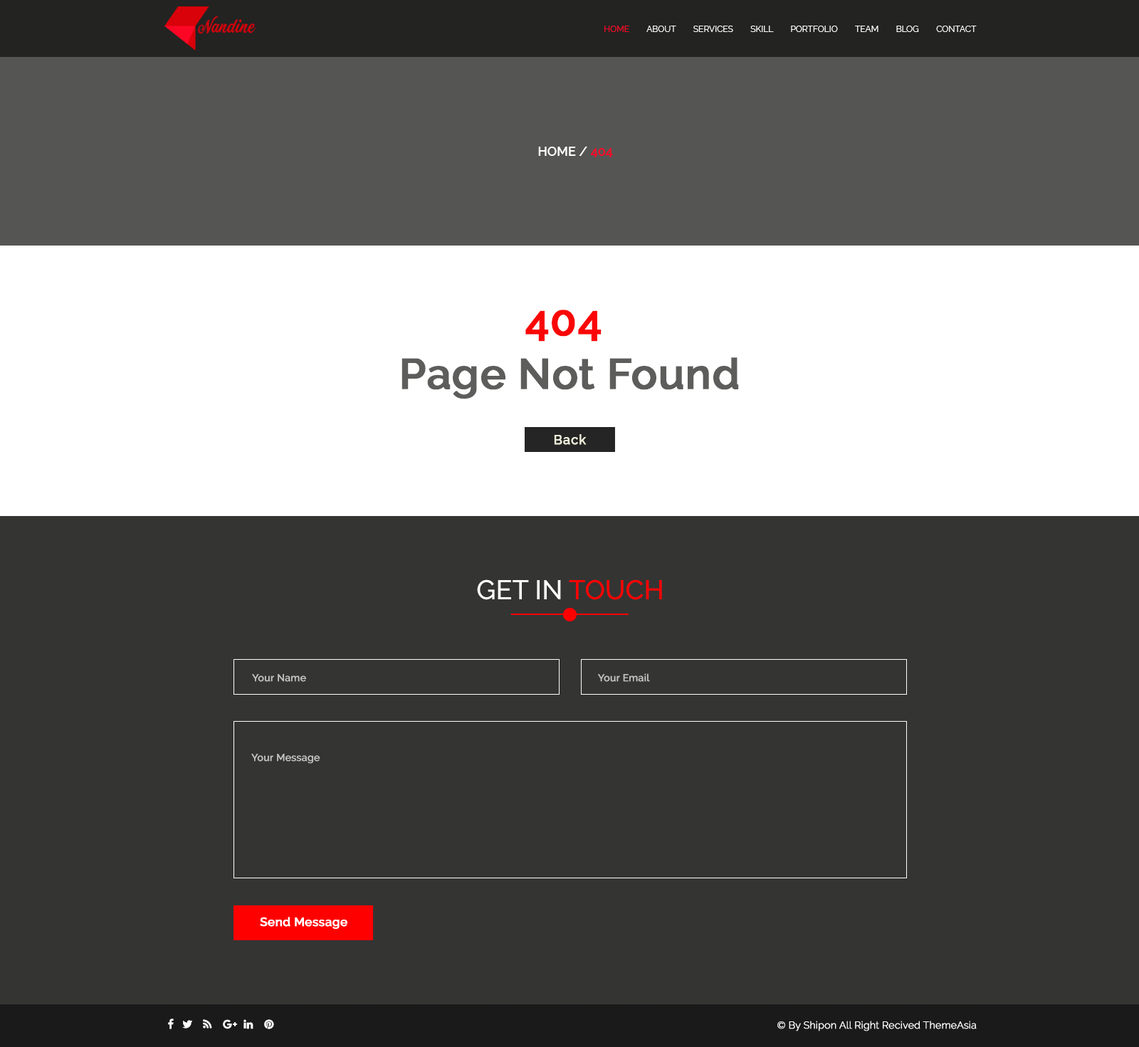
<style>
.page{position:relative;width:1139px;height:1047px;background:#343433}
.page>*{position:absolute;margin:0}
.t1{font:8.5px "Raleway-Regular";color:#ffffff;text-transform:uppercase}
.t2{font:8.5px "Raleway-Regular";color:#fc0625;text-transform:uppercase}
.t3{font:12.8px "Raleway-SemiBold";color:#ffffff;text-transform:uppercase}
.t4{font:12.8px "Raleway-SemiBold";color:#fc0625;text-transform:uppercase}
.t5{font:42.7px/53.4px "Raleway-SemiBold";color:#5d5d5c;font-weight:bold}
.t6{font:42.7px/53.4px "Raleway-SemiBold";color:#fa0606;font-weight:bold}
.t7{font:12.8px "Raleway-Medium";letter-spacing:0.04em;color:#ededda;font-weight:bold}
.t8{font:27px "Raleway-Medium";color:#ffffff;text-transform:uppercase}
.t9{font:27px "Raleway-Medium";color:#ff0000;text-transform:uppercase}
.t10{font:10px "Raleway-Medium";color:#c2c1c1;font-weight:bold}
.t11{font:12.1px "Raleway-SemiBold";color:#ffffff;font-weight:bold}
.t12{font:10px "Raleway-Light";color:#ffffff;font-weight:bold}
</style>
<div class="page">
<p class="t1" style="left:604px;top:26px;width:373px;height:6px"><span class="t2">Home</span>        About        Services        Skill        portfolio        team        blog        contact</p>
<p class="t3" style="left:538px;top:147px;width:75px;height:10px">Home / <span class="t4">404</span></p>
<p class="t5" style="left:401px;top:310px;width:338px;height:89px;text-align:center"><span class="t6">404 <br></span>Page Not Found</p>
<p class="t7" style="left:554px;top:434px;width:33px;height:11px">Back</p>
<p class="t8" style="left:477px;top:579px;width:185px;height:21px">Get in <span class="t9">touch</span></p>
<p class="t10" style="left:252px;top:674px;width:54px;height:8px">Your Name</p>
<p class="t10" style="left:598px;top:673px;width:52px;height:9px">Your Email</p>
<p class="t10" style="left:251px;top:754px;width:69px;height:10px">Your Message</p>
<p class="t11" style="left:260px;top:917px;width:87px;height:12px">Send Message</p>
<p class="t12" style="left:777px;top:1021px;width:200px;height:10px">© By Shipon All Right Recived ThemeAsia</p>
</div>
